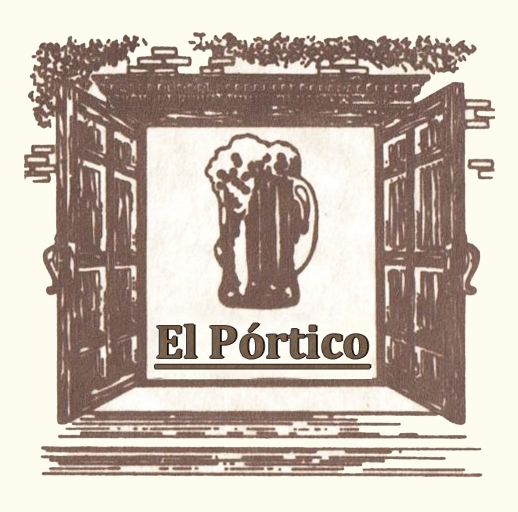
<style>
.page{position:relative;width:518px;height:512px;background:#fefbef}
.page>*{position:absolute;margin:0}
.t1{font:48px "Cambria-Bold";color:#765d49;text-decoration:underline}
.t2{font:48px "Cambria-Bold";color:#745b47;text-decoration:underline}
</style>
<div class="page">
<p class="t1" style="left:155px;top:323px;width:215px;height:46px">El Pórtico</p>
<p class="t2" style="left:156px;top:323px;width:216px;height:45px">El Pórtico</p>
</div>
